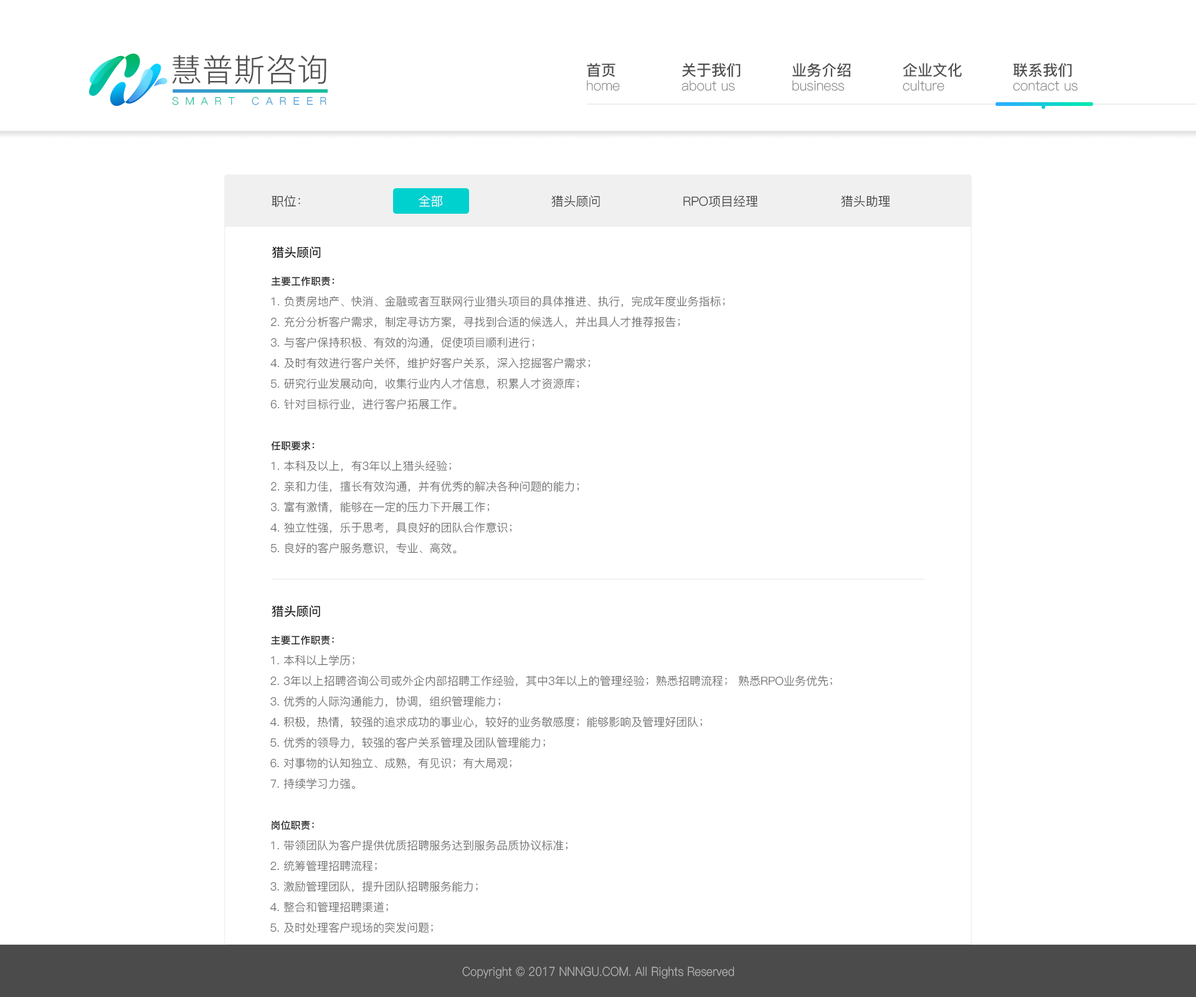
<style>
.page{position:relative;width:1196px;height:997px;background:#ffffff}
.page>*{position:absolute;margin:0}
.t1{font:31.7px "PingFang-SC-Regular";color:#505052}
.t2{font:15px "PingFang-SC-Bold";color:#505050}
.t3{font:13.7px "PingFang-SC-Light";color:#787878}
.t4{font:10.5px "PingFang-SC-Regular";letter-spacing:0.64em;text-transform:uppercase}
.t5{font:12.5px "PingFang-SC-Regular";color:#333333}
.t6{font:12.5px "PingFang-SC-Regular";color:#ffffff}
.t7{font:12.5px "PingFang-SC-Bold";color:#222222}
.t8{font:10px "PingFang-SC-Bold";color:#222222}
.t9{font:11.2px "PingFang-SC-Regular";color:#666666}
.t10{font:12.3px "PingFang-SC-Regular";color:#b4b4b4;scale:0.91 1}
</style>
<div class="page">
<p class="t1" style="left:172px;top:55px;width:154px;height:29px">慧普斯咨询</p>
<p class="t2" style="left:587px;top:63px;width:29px;height:14px">首页</p>
<p class="t2" style="left:682px;top:63px;width:59px;height:14px">关于我们</p>
<p class="t2" style="left:792px;top:63px;width:59px;height:14px">业务介绍</p>
<p class="t2" style="left:903px;top:63px;width:59px;height:14px">企业文化</p>
<p class="t2" style="left:1014px;top:63px;width:58px;height:14px">联系我们</p>
<p class="t3" style="left:587px;top:80px;width:33px;height:11px">home</p>
<p class="t3" style="left:682px;top:80px;width:53px;height:11px">about us</p>
<p class="t3" style="left:792px;top:80px;width:52px;height:11px">business</p>
<p class="t3" style="left:903px;top:80px;width:42px;height:11px">culture</p>
<p class="t3" style="left:1013px;top:81px;width:65px;height:10px">contact us</p>
<p class="t4" style="left:172px;top:97px;width:154px;height:8px">smart career</p>
<p class="t5" style="left:272px;top:195px;width:28px;height:12px">职位：</p>
<p class="t6" style="left:419px;top:195px;width:24px;height:12px">全部</p>
<p class="t5" style="left:551px;top:195px;width:49px;height:12px">猎头顾问</p>
<p class="t5" style="left:683px;top:195px;width:75px;height:12px">RPO项目经理</p>
<p class="t5" style="left:841px;top:195px;width:49px;height:12px">猎头助理</p>
<p class="t7" style="left:272px;top:246px;width:49px;height:13px">猎头顾问</p>
<p class="t8" style="left:271px;top:276px;width:64px;height:10px">主要工作职责：</p>
<p class="t9" style="left:271px;top:296px;width:454px;height:11px">1. 负责房地产、快消、金融或者互联网行业猎头项目的具体推进、执行，完成年度业务指标；</p>
<p class="t9" style="left:271px;top:316px;width:409px;height:12px">2. 充分分析客户需求，制定寻访方案，寻找到合适的候选人，并出具人才推荐报告；</p>
<p class="t9" style="left:270px;top:337px;width:265px;height:11px">3. 与客户保持积极、有效的沟通，促使项目顺利进行；</p>
<p class="t9" style="left:270px;top:358px;width:321px;height:11px">4. 及时有效进行客户关怀，维护好客户关系，深入挖掘客户需求；</p>
<p class="t9" style="left:270px;top:378px;width:309px;height:11px">5. 研究行业发展动向，收集行业内人才信息，积累人才资源库；</p>
<p class="t9" style="left:270px;top:399px;width:187px;height:11px">6. 针对目标行业，进行客户拓展工作。</p>
<p class="t8" style="left:271px;top:440px;width:44px;height:10px">任职要求：</p>
<p class="t9" style="left:271px;top:460px;width:180px;height:12px">1. 本科及以上，有3年以上猎头经验；</p>
<p class="t9" style="left:271px;top:481px;width:308px;height:11px">2. 亲和力佳，擅长有效沟通，并有优秀的解决各种问题的能力；</p>
<p class="t9" style="left:270px;top:502px;width:220px;height:11px">3. 富有激情，能够在一定的压力下开展工作；</p>
<p class="t9" style="left:270px;top:522px;width:242px;height:11px">4. 独立性强，乐于思考，具良好的团队合作意识；</p>
<p class="t9" style="left:270px;top:543px;width:187px;height:11px">5. 良好的客户服务意识，专业、高效。</p>
<p class="t7" style="left:272px;top:605px;width:48px;height:12px">猎头顾问</p>
<p class="t8" style="left:271px;top:635px;width:63px;height:10px">主要工作职责：</p>
<p class="t9" style="left:271px;top:655px;width:84px;height:10px">1. 本科以上学历；</p>
<p class="t9" style="left:270px;top:675px;width:562px;height:12px">2. 3年以上招聘咨询公司或外企内部招聘工作经验，其中3年以上的管理经验；熟悉招聘流程； 熟悉RPO业务优先；</p>
<p class="t9" style="left:270px;top:696px;width:230px;height:11px">3. 优秀的人际沟通能力，协调，组织管理能力；</p>
<p class="t9" style="left:270px;top:716px;width:432px;height:12px">4. 积极，热情，较强的追求成功的事业心，较好的业务敏感度；能够影响及管理好团队；</p>
<p class="t9" style="left:270px;top:737px;width:275px;height:11px">5. 优秀的领导力，较强的客户关系管理及团队管理能力；</p>
<p class="t9" style="left:270px;top:758px;width:242px;height:11px">6. 对事物的认知独立、成熟，有见识；有大局观；</p>
<p class="t9" style="left:270px;top:778px;width:85px;height:11px">7. 持续学习力强。</p>
<p class="t8" style="left:272px;top:820px;width:42px;height:10px">岗位职责：</p>
<p class="t9" style="left:271px;top:840px;width:297px;height:10px">1. 带领团队为客户提供优质招聘服务达到服务品质协议标准；</p>
<p class="t9" style="left:270px;top:860px;width:107px;height:11px">2. 统筹管理招聘流程；</p>
<p class="t9" style="left:270px;top:881px;width:208px;height:11px">3. 激励管理团队，提升团队招聘服务能力；</p>
<p class="t9" style="left:270px;top:902px;width:118px;height:10px">4. 整合和管理招聘渠道；</p>
<p class="t9" style="left:270px;top:922px;width:163px;height:11px">5. 及时处理客户现场的突发问题；</p>
<p class="t10" style="left:462px;top:966px;width:273px;height:13px">Copyright © 2017 NNNGU.COM. All Rights Reserved</p>
</div>
